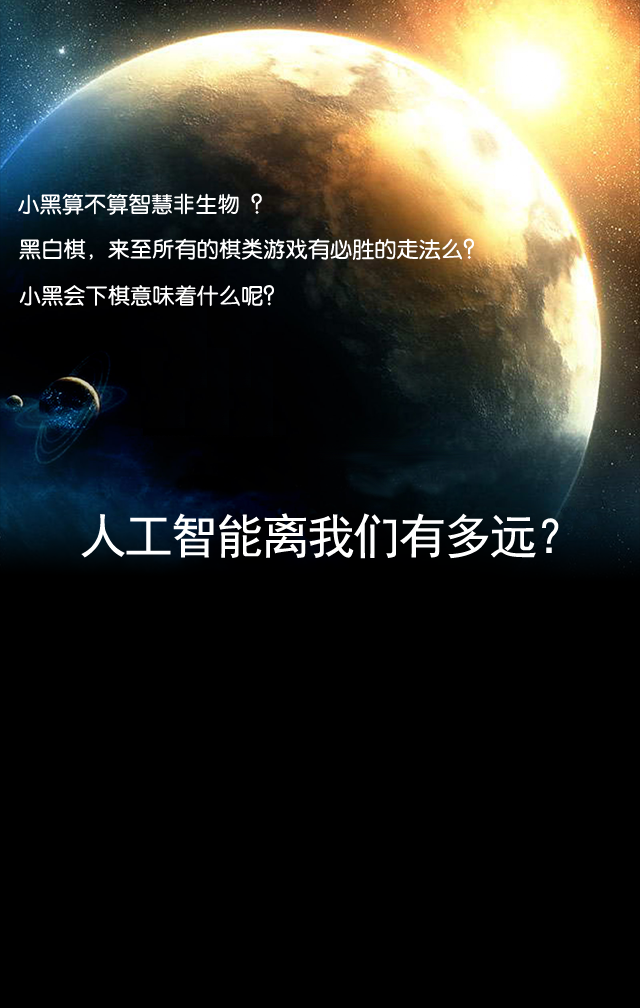
<style>
.page{position:relative;width:640px;height:1008px;background:#000000}
.page>*{position:absolute;margin:0}
.t1{font:22px "FZY3K--GBK1-0";letter-spacing:0.01em;color:#ffffff}
.t2{font:48px "SimHei";letter-spacing:-0.05em;color:#ffffff}
</style>
<div class="page">
<p class="t1" style="left:18px;top:193px;width:244px;height:22px">小黑算不算智慧非生物  ？</p>
<p class="t1" style="left:19px;top:238px;width:455px;height:22px">黑白棋，来至所有的棋类游戏有必胜的走法么？</p>
<p class="t1" style="left:19px;top:285px;width:255px;height:22px">小黑会下棋意味着什么呢？</p>
<p class="t2" style="left:81px;top:513px;width:478px;height:46px">人工智能离我们有多远？</p>
</div>
